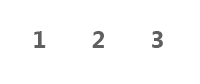
<style>
.page{position:relative;width:200px;height:84px;background:#ffffff}
.page>*{position:absolute;margin:0}
.t1{font:24px "SegoeUI-Bold";color:#5f5f5f}
</style>
<div class="page">
<p class="t1" style="left:34px;top:31px;width:12px;height:17px">1</p>
<p class="t1" style="left:92px;top:31px;width:12px;height:17px">2</p>
<p class="t1" style="left:152px;top:31px;width:11px;height:17px">3</p>
</div>
